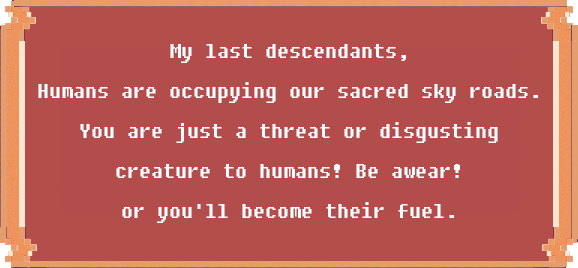
<style>
.page{position:relative;width:578px;height:268px;background:#b24d4b}
.page>*{position:absolute;margin:0}
.t1{font:24px/40px "DungGeunMo";color:#ffffff}
</style>
<div class="page">
<p class="t1" style="left:38px;top:44px;width:500px;height:179px;text-align:center">My last descendants, <br>Humans are occupying our sacred sky roads.<br>You are just a threat or disgusting creature to humans! Be awear!<br>or you'll become their fuel.</p>
</div>
